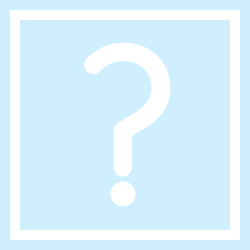
<style>
.page{position:relative;width:250px;height:250px;background:#cfefff}
.page>*{position:absolute;margin:0}
.t1{font:232.8px "Estilo";letter-spacing:-0.02em;color:#ffffff;font-weight:bold}
</style>
<div class="page">
<p class="t1" style="left:84px;top:42px;width:87px;height:165px">?</p>
</div>
